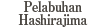
<style>
.page{position:relative;width:105px;height:27px;background:#ffffff}
.page>*{position:absolute;margin:0}
.t1{font:14px/13px "RyuminPro-ExBold";letter-spacing:-0.04em;color:#4c4843;scale:0.9 1}
</style>
<div class="page">
<p class="t1" style="left:18px;top:1px;width:70px;height:26px;text-align:center">Pelabuhan<br>Hashirajima</p>
</div>
